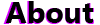
<style>
.page{position:relative;width:100px;height:25px;background:#ffffff}
.page>*{position:absolute;margin:0}
.t1{font:31px "Ebrima-Bold";color:#000000}
.t2{font:30px "Ebrima-Bold";color:#000000}
</style>
<div class="page">
<p class="t1" style="left:3px;top:1px;width:91px;height:23px">About</p>
<p class="t2" style="left:5px;top:1px;width:88px;height:22px">About</p>
</div>
